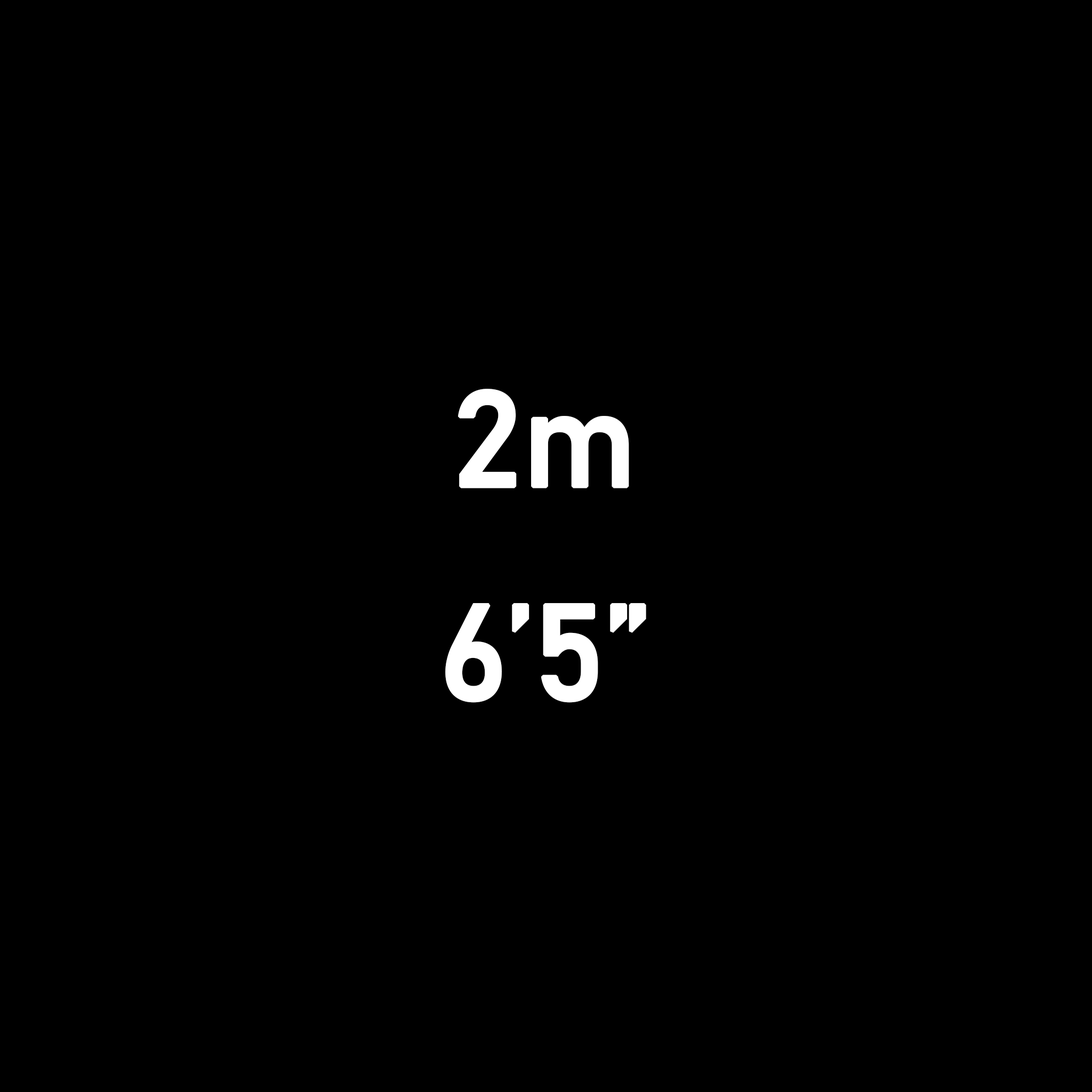
<style>
.page{position:relative;width:1092px;height:1092px;background:#000000}
.page>*{position:absolute;margin:0}
.t1{font:133.3px/213.3px "Bahnschrift";letter-spacing:-0.02em;color:#ffffff;font-weight:bold}
</style>
<div class="page">
<p class="t1" style="left:445px;top:389px;width:201px;height:314px;text-align:center">2m<br>6’5”</p>
</div>
